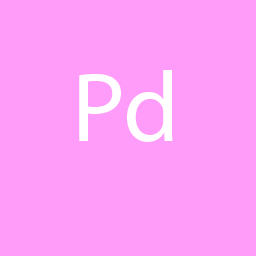
<style>
.page{position:relative;width:256px;height:256px;background:#ff9bf9}
.page>*{position:absolute;margin:0}
.t1{font:100px "MyriadPro-Regular";color:#ffffff}
</style>
<div class="page">
<p class="t1" style="left:79px;top:70px;width:94px;height:72px">Pd</p>
</div>
